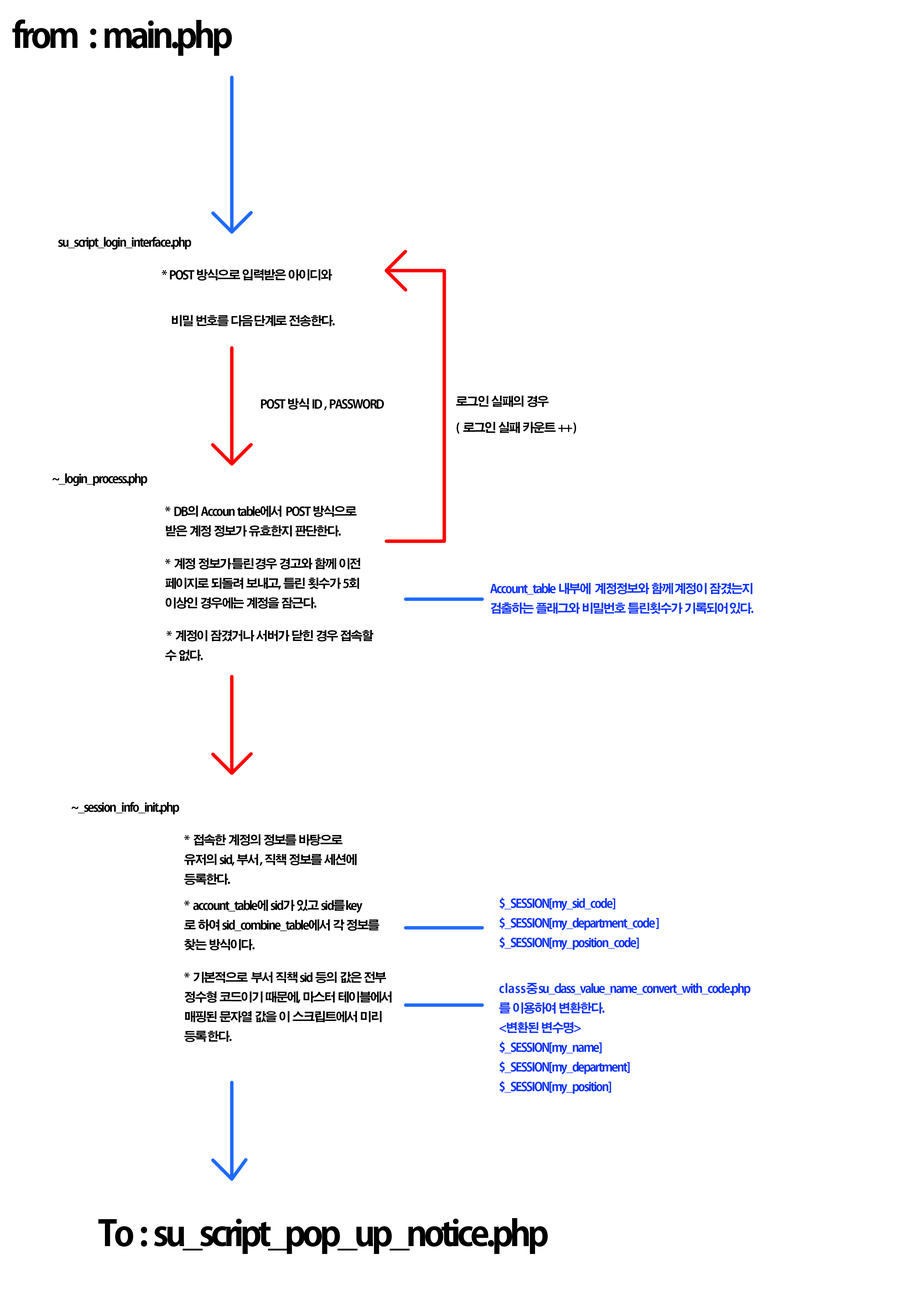
<style>
.page{position:relative;width:918px;height:1299px;background:#ffffff}
.page>*{position:absolute;margin:0}
.t1{font:34.9px "AdobeGothicStd-Bold";letter-spacing:-0.1em;color:#000000}
.t2{font:12px/6.5px "AdobeGothicStd-Bold";letter-spacing:-0.1em;color:#000000}
.t3{font:12px "AdobeGothicStd-Bold";letter-spacing:-0.1em;color:#000000}
.t4{font:12px/6.5px "AdobeGothicStd-Bold";letter-spacing:-0.1em;color:#0f35ff}
</style>
<div class="page">
<p class="t1" style="left:12px;top:19px;width:220px;height:37px">from   :  main.php</p>
<p class="t2" style="left:58px;top:237px;width:277px;height:89px">su_script_login_interface.php<br><br><br><br><br>           *  POST  방식으로  입력받은  아이디와<br><br><br><br><br><br><br>            비밀  번호를  다음 단계로  전송한다.</p>
<p class="t3" style="left:261px;top:398px;width:123px;height:12px">POST  방식  ID  ,  PASSWORD</p>
<p class="t2" style="left:456px;top:395px;width:120px;height:38px">로그인  실패의  경우<br><br><br><br>(   로그인  실패  카운트  ++ )</p>
<p class="t2" style="left:52px;top:473px;width:322px;height:188px">~_login_process.php<br><br><br><br><br>            *   DB의  Accoun  table에서   POST  방식으로<br><br><br>            받은  계정  정보가  유효한지  판단한다.<br><br>  <br><br><br>            *   계정  정보가 틀린 경우  경고와  함께  이전<br><br>        <br>            페이지로  되돌려  보내고,  틀린  횟수가  5회<br><br><br>            이상인  경우에는  계정을  잠근다.<br><br><br><br><br>                                    *   계정이  잠겼거나  서버가  닫힌  경우  접속할<br><br><br>            수  없다.</p>
<p class="t4" style="left:490px;top:582px;width:264px;height:32px">Account_table  내부에   계정정보와  함께 계정이  잠겼는지<br><br><br>검출하는  플래그와  비밀번호  틀린횟수가  기록되어 있다.</p>
<p class="t2" style="left:71px;top:802px;width:321px;height:240px">~_session_info_init.php<br>  <br><br><br><br>            *   접속한  계정의  정보를  바탕으로<br><br><br>            유저의  sid,  부서 ,  직책  정보를  세션에<br><br><br>                       등록한다.<br><br><br><br>            *   account_table에  sid가  있고  sid를 key<br><br><br>            로  하여  sid_combine_table에서  각  정보를<br><br><br>            찾는  방식이다. <br><br><br><br><br>            *   기본적으로   부서  직책  sid  등의  값은  전부<br><br><br>            정수형  코드이기  때문에,  마스터  테이블에서<br><br><br>            매핑된  문자열  값을  이  스크립트에서  미리  <br><br><br>            등록 한다.</p>
<p class="t4" style="left:499px;top:897px;width:252px;height:197px">$_SESSION[my_sid_code]<br><br><br>$_SESSION[my_department_code ]<br><br><br>$_SESSION[my_position_code]<br><br><br><br><br><br><br>c l a s s 중 su_class_value_name_convert_with_code.php<br><br><br>를  이용하여  변환한다.<br><br><br>&lt;변환된  변수명&gt;<br><br><br>$_SESSION[my_name]<br><br><br>$_SESSION[my_department]<br><br><br>$_SESSION[my_position]</p>
<p class="t1" style="left:98px;top:1218px;width:450px;height:36px">To  :  su_script_pop_up_notice.php</p>
</div>
